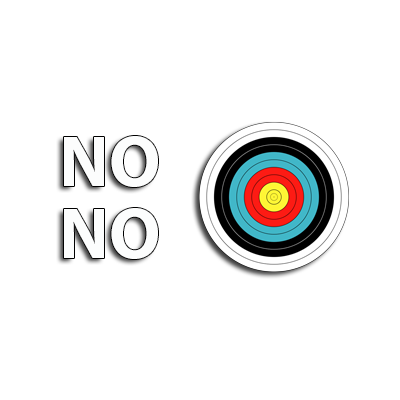
<style>
.page{position:relative;width:400px;height:400px;background:#ffffff}
.page>*{position:absolute;margin:0}
.t1{font:72px/72px "MyriadPro-Bold";color:#fcfdfd}
</style>
<div class="page">
<p class="t1" style="left:64px;top:136px;width:94px;height:123px">NO<br>NO</p>
</div>
